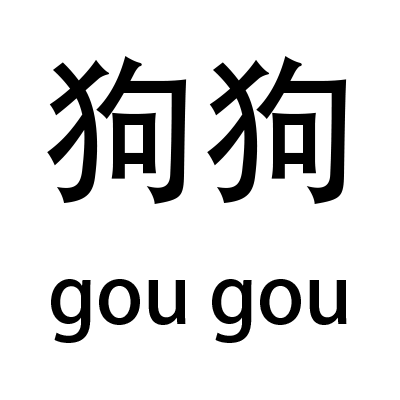
<style>
.page{position:relative;width:400px;height:400px;background:#ffffff}
.page>*{position:absolute;margin:0}
.t1{font:160px "AdobeHeitiStd-Regular";color:#000000}
.t2{font:80px "AdobeHeitiStd-Regular";color:#000000}
</style>
<div class="page">
<p class="t1" style="left:47px;top:56px;width:300px;height:148px">狗狗</p>
<p class="t2" style="left:51px;top:279px;width:296px;height:64px">gou gou</p>
</div>
